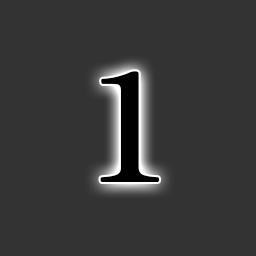
<style>
.page{position:relative;width:256px;height:256px;background:#333333}
.page>*{position:absolute;margin:0}
.t1{font:150px "ZenAntique-Regular";letter-spacing:-0.18em;color:#000000}
</style>
<div class="page">
<p class="t1" style="left:100px;top:71px;width:60px;height:111px">1</p>
</div>
